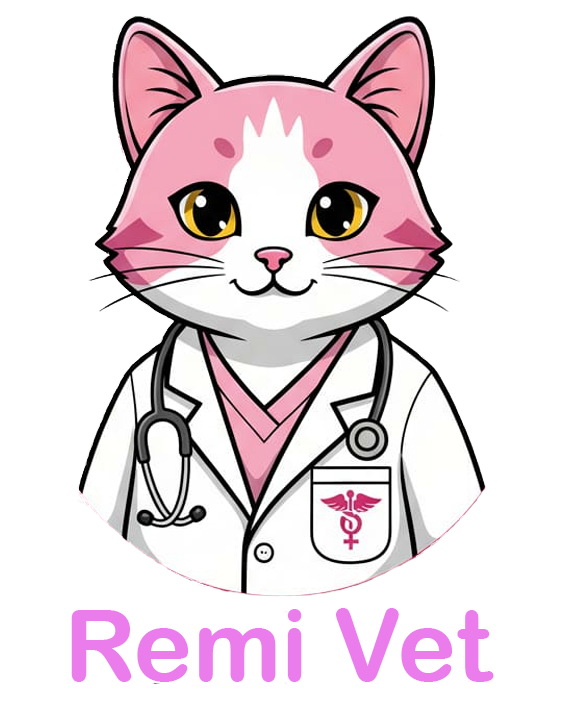
<style>
.page{position:relative;width:566px;height:707px;background:#ffffff}
.page>*{position:absolute;margin:0}
.t1{font:100px "ArialRoundedMTBold";color:#ea7ceb}
</style>
<div class="page">
<p class="t1" style="left:71px;top:608px;width:423px;height:74px">Remi Vet</p>
</div>
